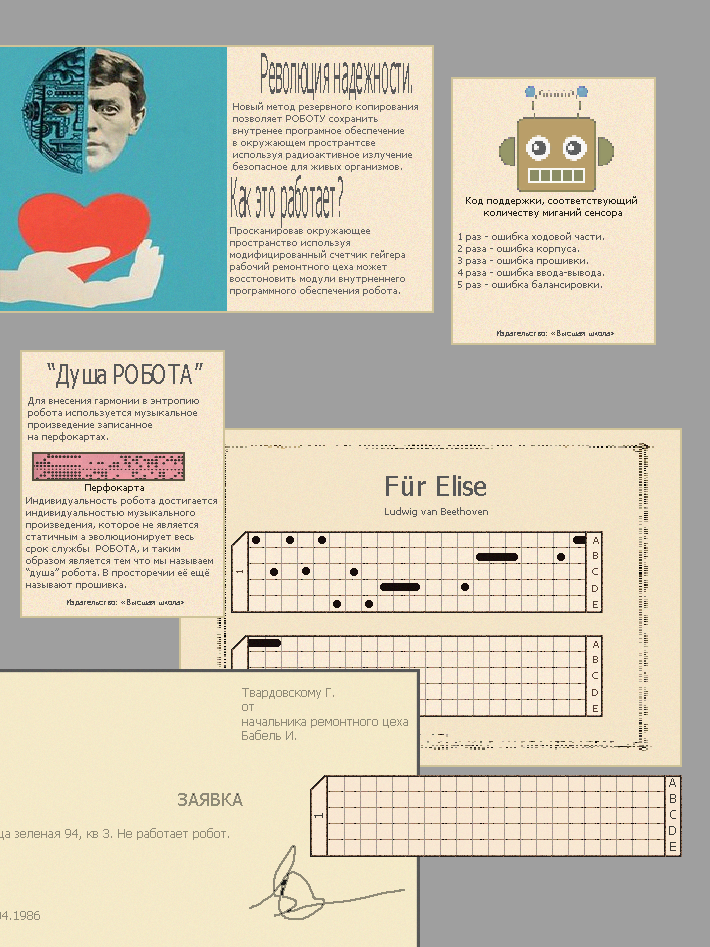
<style>
.page{position:relative;width:710px;height:947px;background:#9f9f9f}
.page>*{position:absolute;margin:0}
.t1{font:54.6px "Tahoma";color:#5a5a5a;scale:0.24 1}
.t2{font:10px "Tahoma";color:#636363}
.t3{font:10px "Tahoma";color:#222019}
.t4{font:10px "Tahoma";color:#585858}
.t5{font:8px "Tahoma";color:#4e4e4e}
.t6{font:26.5px "Tahoma";color:#585858;scale:0.74 1}
.t7{font:26.5px "Tahoma";color:#585858}
.t8{font:12px "Tahoma";color:#3a3935}
.t9{font:11.7px "Tahoma";color:#3a3935}
</style>
<div class="page">
<p class="t1" style="left:261px;top:53px;width:151px;height:47px">Революция надежности.</p>
<p class="t2" style="left:233px;top:102px;width:185px;height:70px">Новый метод резервного копирования<br>позволяет РОБОТУ сохранить<br>внутренее програмное обеспечение<br>в окружающем пространтсве<br>используя радиоактивное излучение<br>безопасное для живых организмов.</p>
<p class="t1" style="left:231px;top:175px;width:112px;height:53px">Как это работает?</p>
<p class="t3" style="left:466px;top:196px;width:171px;height:22px;text-align:center">Код поддержки, соответствующий <br>количеству миганий сенсора</p>
<p class="t2" style="left:230px;top:227px;width:175px;height:69px">Просканировав окружающее <br>пространство используя <br>модифицированный счетчик гейгера <br>рабочий ремонтного цеха может <br>восстоновить модули внутрненнего <br>программного обеспечения робота.</p>
<p class="t4" style="left:458px;top:232px;width:146px;height:58px">1 раз - ошибка ходовой части.<br>2 раза - ошибка корпуса.<br>3 раза - ошибка прошивки.<br>4 раза - ошибка ввода-вывода.<br>5 раз - ошибка балансировки.</p>
<p class="t5" style="left:497px;top:330px;width:117px;height:7px">Издательство: «Высшая школа»</p>
<p class="t6" style="left:47px;top:363px;width:156px;height:26px">“Душа РОБОТА”</p>
<p class="t4" style="left:28px;top:397px;width:171px;height:45px">Для внесения гармонии в энтропию<br>робота используется музыкальное<br>произведение записанное <br>на перфокартах.</p>
<p class="t3" style="left:85px;top:483px;width:59px;height:10px">Перфокарта</p>
<p class="t7" style="left:386px;top:475px;width:100px;height:21px">Für Elise</p>
<p class="t4" style="left:26px;top:496px;width:191px;height:94px">Индивидуальность робота достигается<br>индивидуальностью музыкального<br>произведения, которое не является <br>статичным а эволюционирует весь <br>срок службы  РОБОТА, и таким <br>образом является тем что мы называем <br>“душа” робота. В просторечии её ещё <br>называют прошивка.</p>
<p class="t4" style="left:385px;top:507px;width:103px;height:10px">Ludwig van Beethoven</p>
<p class="t5" style="left:67px;top:599px;width:117px;height:7px">Издательство: «Высшая школа»</p>
<p class="t8" style="left:669px;top:778px;width:7px;height:9px">A</p>
<p class="t8" style="left:670px;top:794px;width:6px;height:9px">B</p>
<p class="t9" style="left:314px;top:813px;width:9px;height:5px;rotate:-90deg">1</p>
<p class="t8" style="left:670px;top:810px;width:6px;height:9px">C</p>
<p class="t8" style="left:669px;top:826px;width:7px;height:9px">D</p>
<p class="t8" style="left:670px;top:842px;width:6px;height:9px">E</p>
</div>
